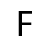
<style>
.page{position:relative;width:50px;height:50px;background:#ffffff}
.page>*{position:absolute;margin:0}
.t1{font:36px "MyriadPro-Regular";color:#000000}
</style>
<div class="page">
<p class="t1" style="left:18px;top:11px;width:14px;height:25px">F</p>
</div>
